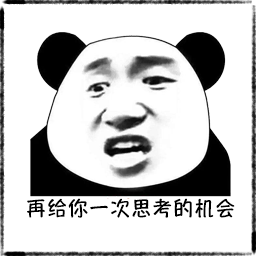
<style>
.page{position:relative;width:256px;height:256px;background:#ffffff}
.page>*{position:absolute;margin:0}
.t1{font:20px "HannotateSC-W7";letter-spacing:0.055em;color:#000000}
</style>
<div class="page">
<p class="t1" style="left:27px;top:198px;width:208px;height:20px">再给你一次思考的机会</p>
</div>
